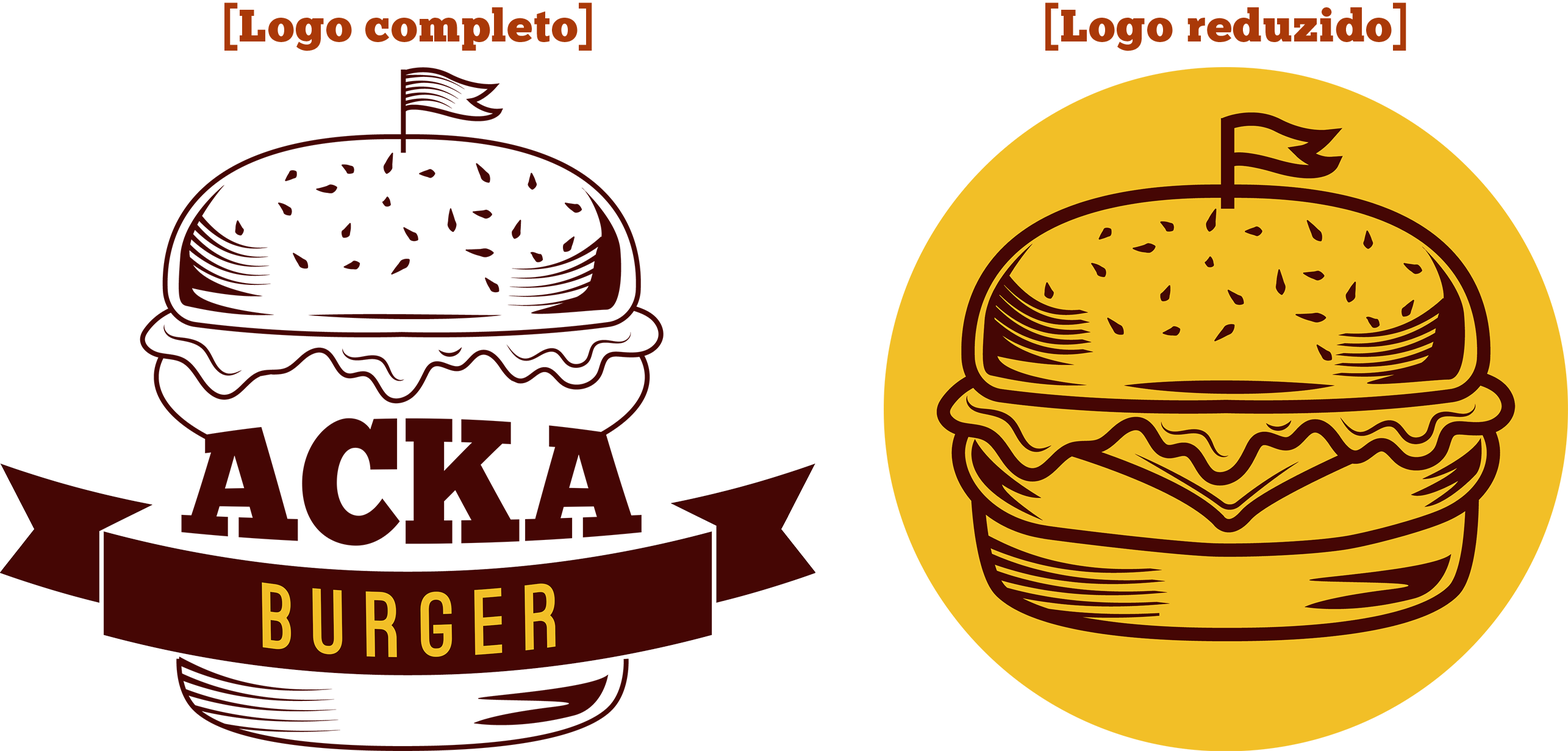
<style>
.page{position:relative;width:1568px;height:751px;background:#ffffff}
.page>*{position:absolute;margin:0}
.t1{font:45.7px "ChunkFive-Regular";letter-spacing:0.025em;color:#aa3908}
</style>
<div class="page">
<p class="t1" style="left:224px;top:2px;width:368px;height:49px">[Logo completo]</p>
<p class="t1" style="left:1045px;top:2px;width:361px;height:49px">[Logo reduzido]</p>
</div>
